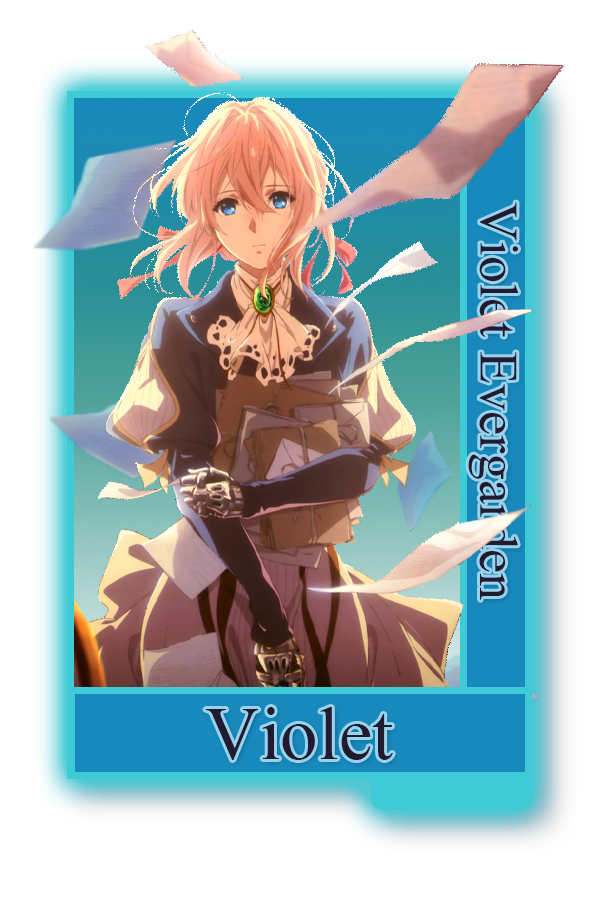
<style>
.page{position:relative;width:600px;height:900px;background:#ffffff}
.page>*{position:absolute;margin:0}
.t1{font:54px "TimesNewRomanPSMT";color:#252525}
.t2{font:75px "TimesNewRomanPSMT";color:#252525}
</style>
<div class="page">
<p class="t1" style="left:468px;top:202px;width:50px;height:398px;rotate:90deg">Violet Evergarden</p>
<p class="t2" style="left:205px;top:707px;width:188px;height:53px">Violet</p>
</div>
